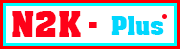
<style>
.page{position:relative;width:180px;height:49px;background:#ffffff}
.page>*{position:absolute;margin:0}
.t1{font:40px "VNI-Auchon-Bold";color:#fe0119}
.t2{font:29px "VNI-Auchon-Bold";color:#01d7fe}
.t3{font:30px "VNI-Auchon-Bold";color:#fe0119}
</style>
<div class="page">
<p class="t1" style="left:12px;top:11px;width:69px;height:26px">N2K</p>
<p class="t2" style="left:111px;top:16px;width:53px;height:19px">Plus</p>
<p class="t3" style="left:89px;top:22px;width:8px;height:6px">-</p>
</div>
